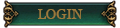
<style>
.page{position:relative;width:120px;height:28px;background:#ffffff}
.page>*{position:absolute;margin:0}
.t1{font:14px "Georgia";color:#9c793b}
</style>
<div class="page">
<p class="t1" style="left:38px;top:9px;width:45px;height:10px">LOGIN</p>
</div>
